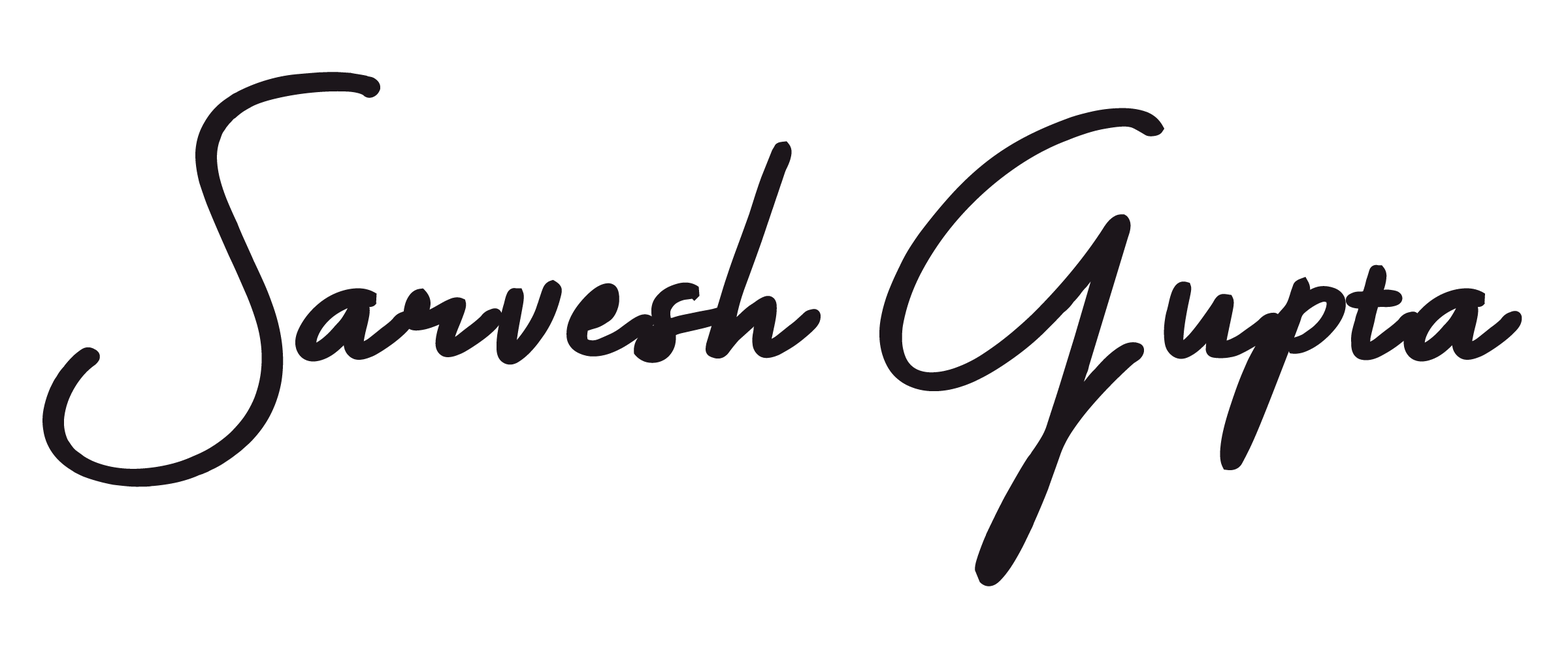
<style>
.page{position:relative;width:1568px;height:653px;background:#ffffff}
.page>*{position:absolute;margin:0}
.t1{font:435.6px "DarceyOliver-Regular";color:#1c161b;font-weight:bold}
</style>
<div class="page">
<p class="t1" style="left:42px;top:72px;width:1480px;height:515px">Sarvesh Gupta</p>
</div>
